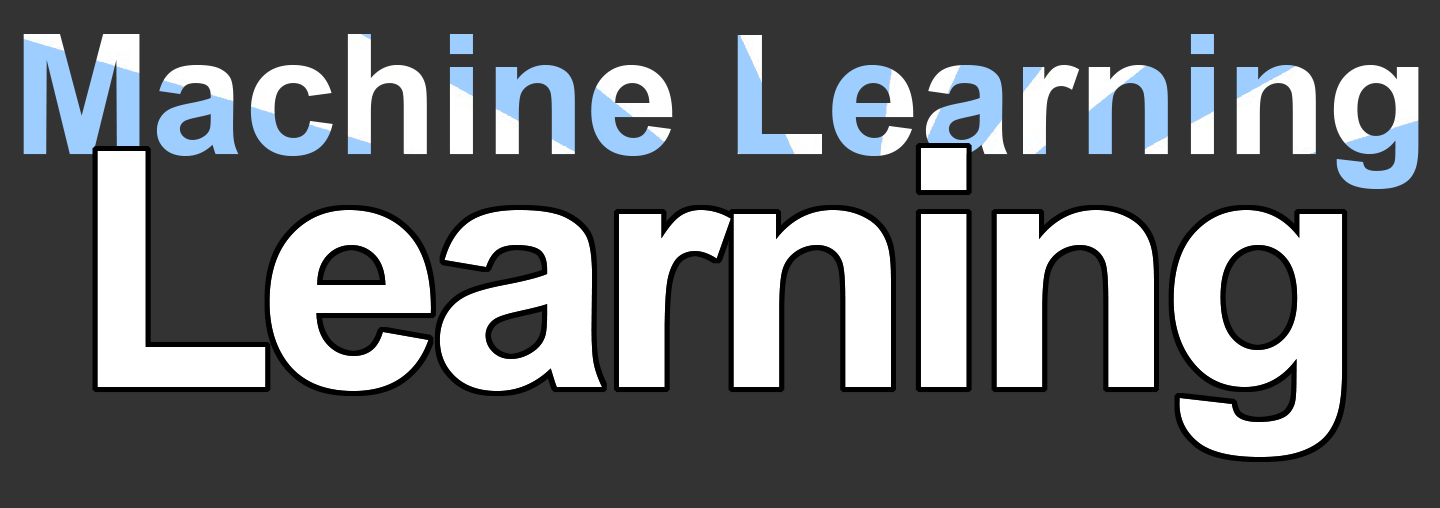
<style>
.page{position:relative;width:1440px;height:508px;background:#333333}
.page>*{position:absolute;margin:0}
.t1{font:166.7px "Arial-BoldMT"}
</style>
<div class="page">
<p class="t1" style="left:23px;top:34px;width:1396px;height:155px">Machine Learning</p>
</div>
